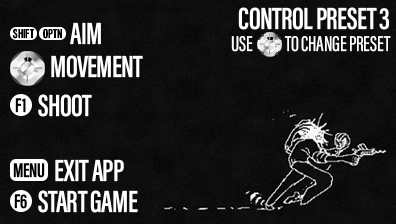
<style>
.page{position:relative;width:396px;height:224px}
.page>*{position:absolute;margin:0}
.t1{font:22px/22px "AcuminConcept-ExtraCondensedMedium";letter-spacing:-0.01em;color:#ffffff}
.t2{font:31.5px/30px "AcuminConcept-ExtraCondensedSemibold";letter-spacing:-0.02em;color:#ffffff}
.t3{font:13.3px "AcuminConcept-ExtraCondensedSemibold";color:#000000}
.t4{font:31.5px "AcuminConcept-ExtraCondensedSemibold";letter-spacing:-0.02em;color:#ffffff}
.t5{font:20.3px "AcuminConcept-ExtraCondensedSemibold";letter-spacing:0.02em;color:#000000}
.t6{font:20.3px "AcuminConcept-ExtraCondensedSemibold";letter-spacing:-0.02em;color:#000000}
</style>
<div class="page">
<p class="t1" style="left:231px;top:7px;width:160px;height:45px;text-align:right"><span class="t2">CONTROL PRESET 3<br></span>USE            TO CHANGE PRESET</p>
<p class="t3" style="left:13px;top:28px;width:22px;height:11px">SHIFT</p>
<p class="t3" style="left:43px;top:28px;width:19px;height:11px">OPTN</p>
<p class="t4" style="left:70px;top:22px;width:31px;height:23px">AIM</p>
<p class="t4" style="left:51px;top:55px;width:92px;height:23px">MOVEMENT</p>
<p class="t5" style="left:15px;top:98px;width:11px;height:15px">F<span class="t6">1</span></p>
<p class="t4" style="left:38px;top:94px;width:54px;height:23px">SHOOT</p>
<p class="t4" style="left:55px;top:159px;width:69px;height:23px">EXIT APP</p>
<p class="t6" style="left:13px;top:163px;width:32px;height:15px">MENU</p>
<p class="t6" style="left:14px;top:194px;width:13px;height:15px">F6</p>
<p class="t4" style="left:38px;top:190px;width:100px;height:23px">START GAME</p>
</div>
